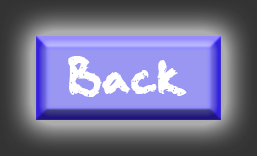
<style>
.page{position:relative;width:257px;height:156px}
.page>*{position:absolute;margin:0}
.t1{font:40px "squeakychalksound";color:#ffffff}
</style>
<div class="page">
<p class="t1" style="left:68px;top:56px;width:119px;height:41px">Back</p>
</div>
